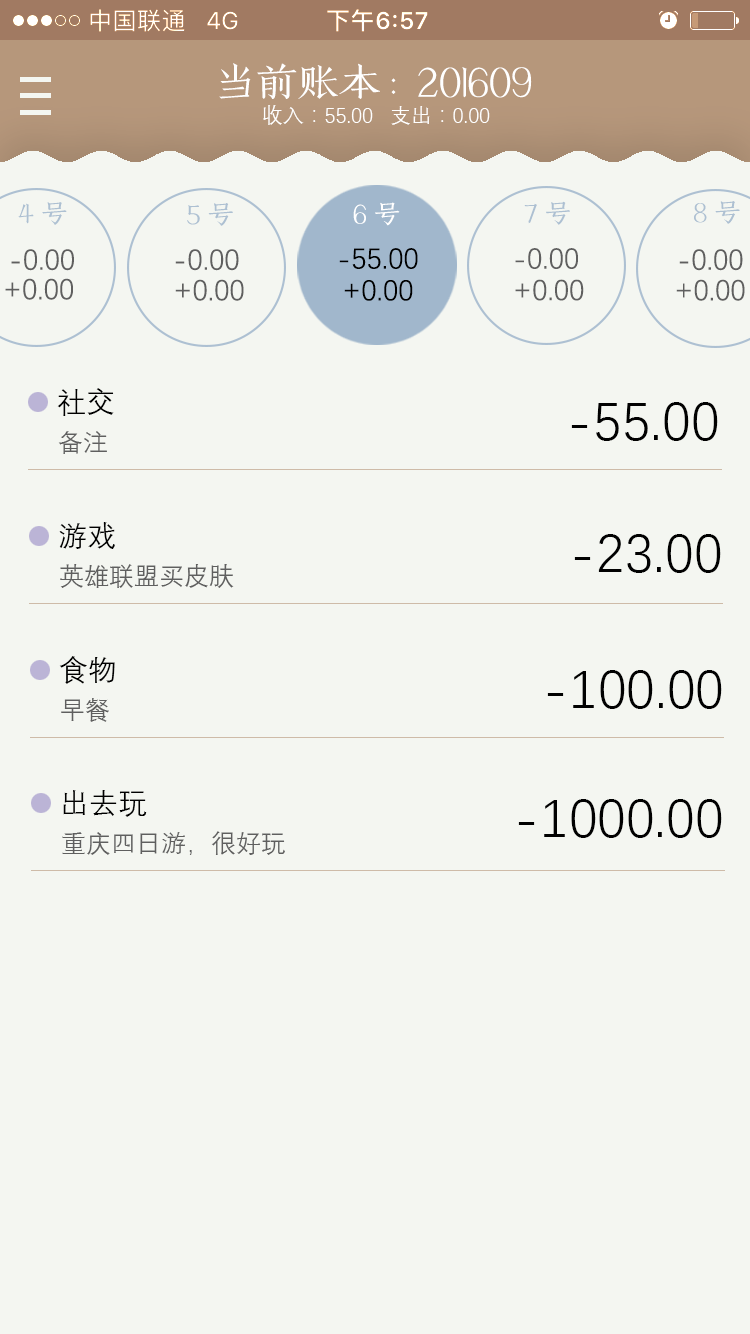
<style>
.page{position:relative;width:750px;height:1334px;background:#f4f6f1}
.page>*{position:absolute;margin:0}
.t1{font:41.7px "MFKeSong_Noncommercial-Regular";color:#ffffff}
.t2{font:20.8px "DengXian-Regular";color:#ffffff}
.t3{font:27.1px "MFKeSong_Noncommercial-Regular";color:#adc0d2}
.t4{font:27.1px "MFKeSong_Noncommercial-Regular";color:#ffffff}
.t5{font:29.2px "DengXian-Regular";color:#5f5f5f}
.t6{font:29.2px "DengXian-Regular";color:#000000}
.t7{font:54.2px "DengXian-Regular";color:#010101}
.t8{font:25px "DengXian-Regular";color:#5f5f5f}
</style>
<div class="page">
<p class="t1" style="left:219px;top:63px;width:313px;height:36px">当前账本:  201609</p>
<p class="t2" style="left:263px;top:105px;width:227px;height:20px">收入：55.00   支出：0.00</p>
<p class="t3" style="left:18px;top:202px;width:49px;height:23px">4号</p>
<p class="t3" style="left:187px;top:203px;width:46px;height:23px">5号</p>
<p class="t4" style="left:353px;top:202px;width:47px;height:24px">6号</p>
<p class="t3" style="left:524px;top:201px;width:46px;height:24px">7号</p>
<p class="t3" style="left:694px;top:201px;width:46px;height:23px">8号</p>
<p class="t5" style="left:11px;top:249px;width:63px;height:22px">-0.00</p>
<p class="t5" style="left:175px;top:249px;width:64px;height:22px">-0.00</p>
<p class="t6" style="left:339px;top:248px;width:79px;height:21px">-55.00</p>
<p class="t5" style="left:515px;top:248px;width:63px;height:21px">-0.00</p>
<p class="t5" style="left:679px;top:249px;width:64px;height:22px">-0.00</p>
<p class="t5" style="left:5px;top:278px;width:68px;height:22px">+0.00</p>
<p class="t5" style="left:175px;top:279px;width:69px;height:22px">+0.00</p>
<p class="t6" style="left:344px;top:280px;width:69px;height:21px">+0.00</p>
<p class="t5" style="left:515px;top:279px;width:69px;height:22px">+0.00</p>
<p class="t5" style="left:676px;top:279px;width:69px;height:22px">+0.00</p>
<p class="t6" style="left:57px;top:388px;width:57px;height:28px">社交</p>
<p class="t7" style="left:571px;top:402px;width:147px;height:39px">-55.00</p>
<p class="t8" style="left:58px;top:431px;width:49px;height:23px">备注</p>
<p class="t6" style="left:59px;top:522px;width:56px;height:27px">游戏</p>
<p class="t7" style="left:574px;top:534px;width:147px;height:39px">-23.00</p>
<p class="t8" style="left:60px;top:564px;width:174px;height:24px">英雄联盟买皮肤</p>
<p class="t6" style="left:59px;top:656px;width:56px;height:28px">食物</p>
<p class="t7" style="left:547px;top:670px;width:175px;height:39px">-100.00</p>
<p class="t8" style="left:61px;top:698px;width:48px;height:24px">早餐</p>
<p class="t6" style="left:63px;top:790px;width:84px;height:27px">出去玩</p>
<p class="t7" style="left:518px;top:799px;width:204px;height:39px">-1000.00</p>
<p class="t8" style="left:62px;top:831px;width:223px;height:24px">重庆四日游，很好玩</p>
</div>
